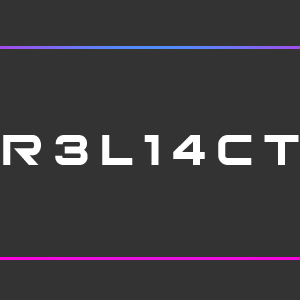
<style>
.page{position:relative;width:300px;height:300px;background:#333333}
.page>*{position:absolute;margin:0}
.t1{font:58.3px "Bitsumishi";letter-spacing:0.2em;color:#ffffff}
</style>
<div class="page">
<p class="t1" style="left:3px;top:135px;width:296px;height:30px">R3l14ct</p>
</div>
